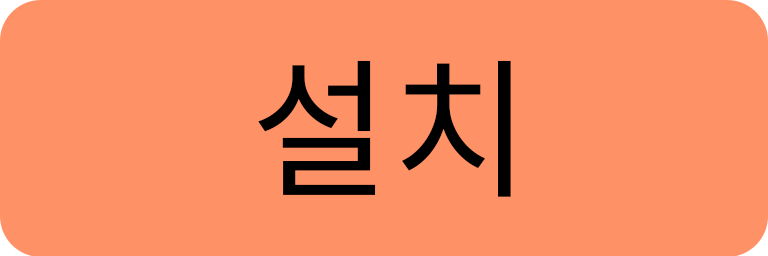
<style>
.page{position:relative;width:768px;height:256px;background:#ff9166}
.page>*{position:absolute;margin:0}
.t1{font:150px "NotoSansKR-Regular";letter-spacing:0.02em;color:#000000}
</style>
<div class="page">
<p class="t1" style="left:258px;top:60px;width:253px;height:137px">설치</p>
</div>
